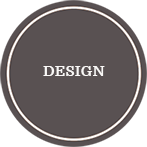
<style>
.page{position:relative;width:147px;height:147px;background:#595152}
.page>*{position:absolute;margin:0}
.t1{font:15px "Domine-Bold";letter-spacing:0.01em;color:#faf8f7}
</style>
<div class="page">
<p class="t1" style="left:43px;top:66px;width:62px;height:10px">DESIGN</p>
</div>
